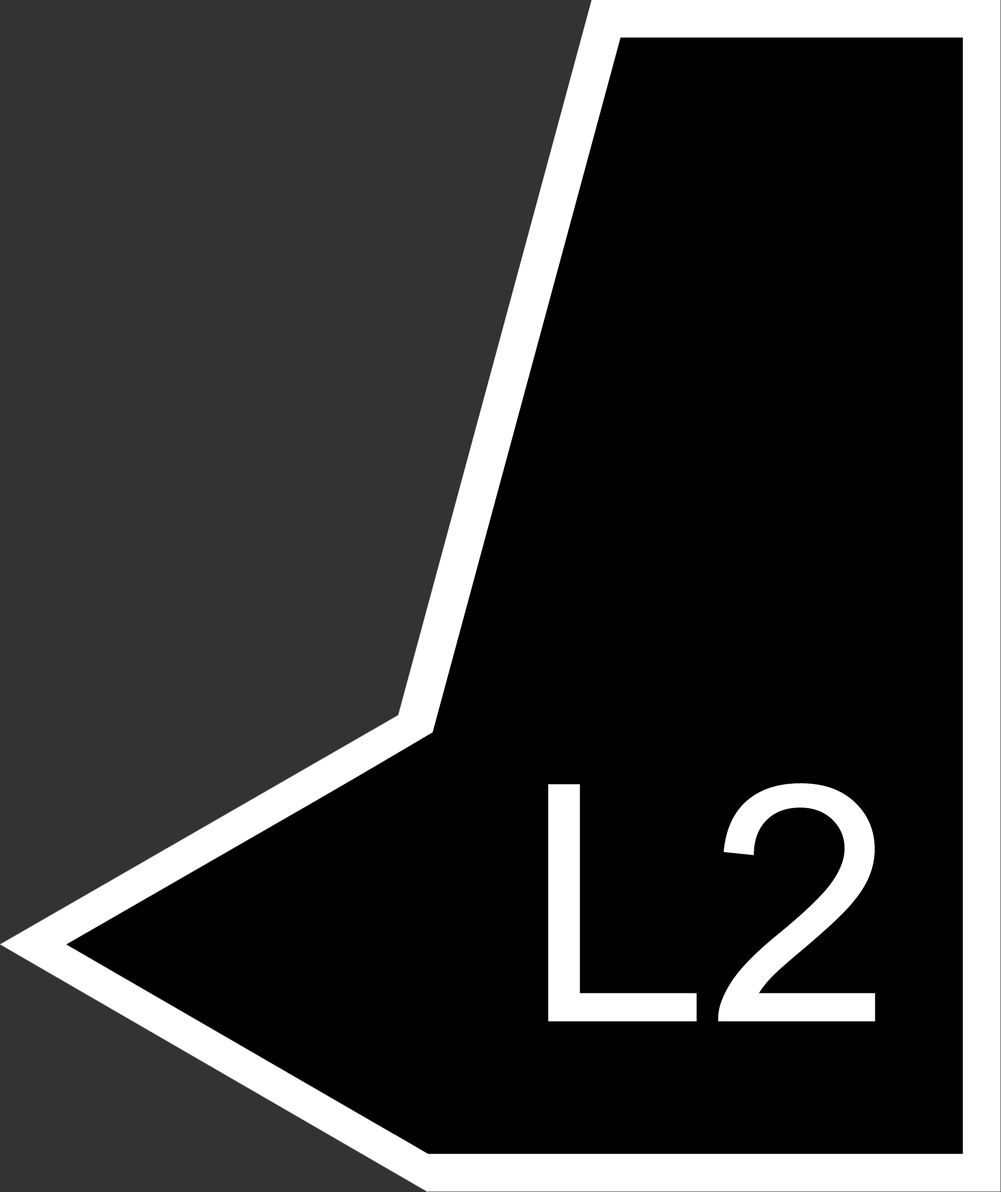
<style>
.page{position:relative;width:1001px;height:1192px;background:#000000}
.page>*{position:absolute;margin:0}
.t1{font:330.8px "ArialMT";color:#ffffff}
</style>
<div class="page">
<p class="t1" style="left:548px;top:783px;width:327px;height:238px">L2</p>
</div>
